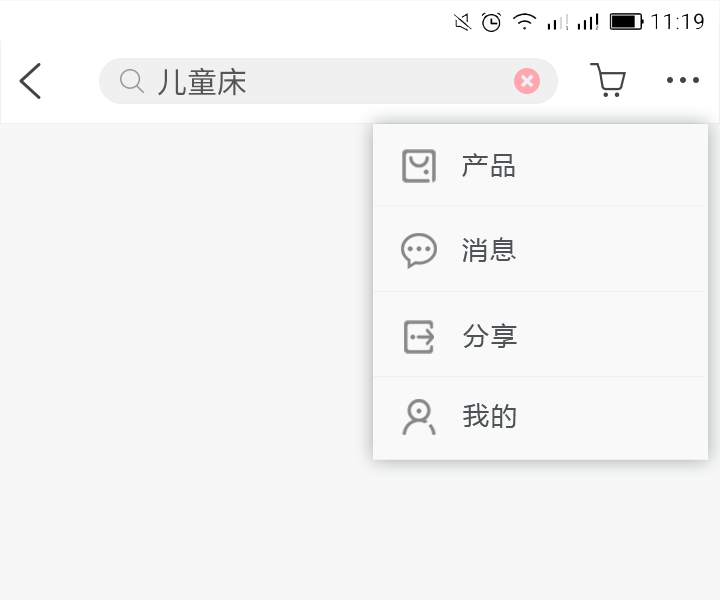
<style>
.page{position:relative;width:720px;height:600px;background:#f7f7f7}
.page>*{position:absolute;margin:0}
.t1{font:30px "NotoSansHans-Regular";color:#555555}
.t2{font:26px "MicrosoftYaHei";letter-spacing:0.075em;color:#4e5356}
</style>
<div class="page">
<p class="t1" style="left:158px;top:67px;width:88px;height:29px">儿童床</p>
<p class="t2" style="left:462px;top:153px;width:53px;height:24px">产品</p>
<p class="t2" style="left:462px;top:237px;width:54px;height:25px">消息</p>
<p class="t2" style="left:463px;top:323px;width:54px;height:25px">分享</p>
<p class="t2" style="left:463px;top:403px;width:53px;height:25px">我的</p>
</div>
